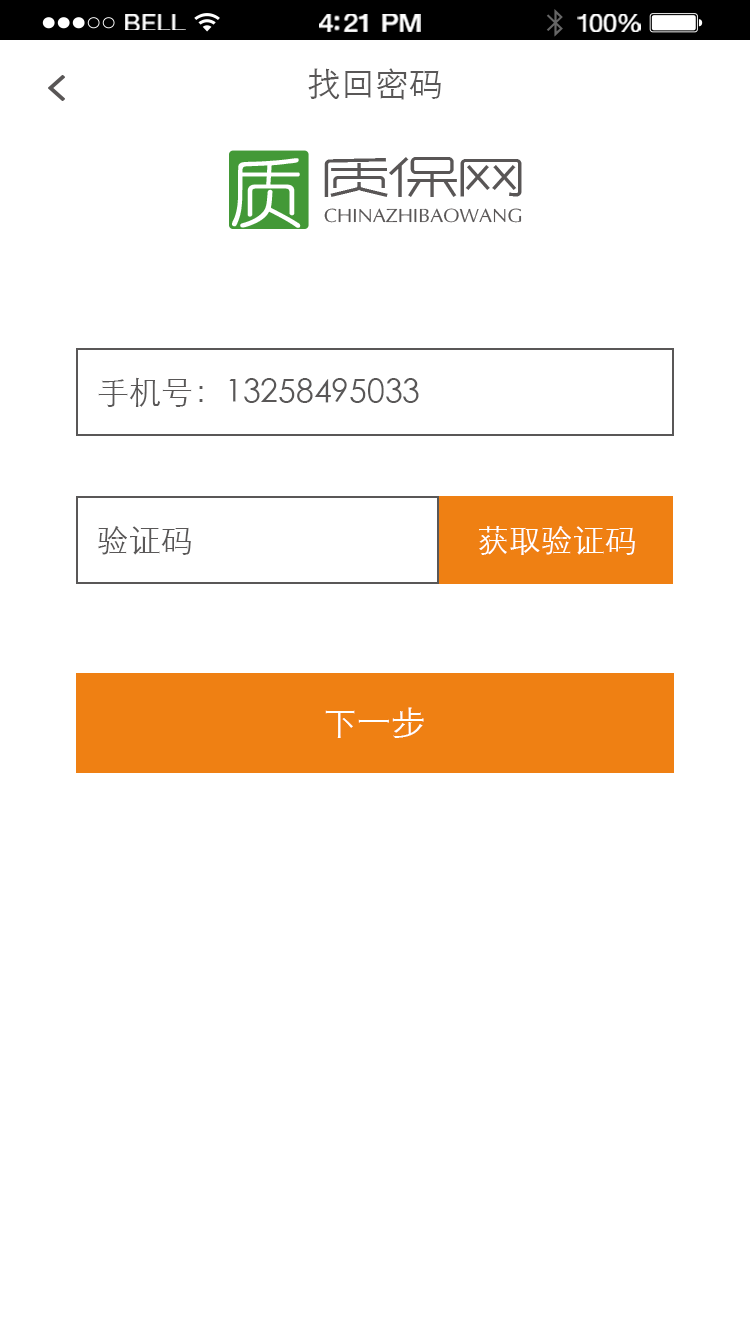
<style>
.page{position:relative;width:750px;height:1334px;background:#ffffff}
.page>*{position:absolute;margin:0}
.t1{font:23.3px "HelveticaNeue";letter-spacing:0.02em;color:#ffffff;scale:1.06 1}
.t2{font:25.3px "HelveticaNeue-Medium";letter-spacing:-0.02em;color:#ffffff;scale:1.06 1}
.t3{font:24.3px "HelveticaNeue";letter-spacing:-0.02em;color:#ffffff;scale:1.06 1}
.t4{font:34px "STXihei";color:#595757}
.t5{font:32px "STXihei";color:#595757}
.t6{font:32px "STXihei";color:#ffffff}
.t7{font:34px "STXihei";color:#ffffff}
</style>
<div class="page">
<p class="t1" style="left:125px;top:14px;width:61px;height:16px">BELL</p>
<p class="t2" style="left:319px;top:14px;width:102px;height:18px">4:21 PM</p>
<p class="t3" style="left:577px;top:14px;width:64px;height:18px">100%</p>
<p class="t4" style="left:308px;top:68px;width:133px;height:32px">找回密码</p>
<p class="t5" style="left:98px;top:377px;width:321px;height:30px">手机号：13258495033</p>
<p class="t5" style="left:98px;top:526px;width:93px;height:29px">验证码</p>
<p class="t6" style="left:479px;top:526px;width:156px;height:29px">获取验证码</p>
<p class="t7" style="left:325px;top:707px;width:99px;height:31px">下一步</p>
</div>
